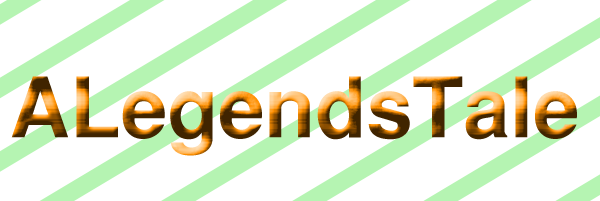
<style>
.page{position:relative;width:600px;height:201px;background:#ffffff}
.page>*{position:absolute;margin:0}
.t1{font:83.3px "SansSerifBold"}
</style>
<div class="page">
<p class="t1" style="left:11px;top:76px;width:566px;height:80px">ALegendsTale</p>
</div>
